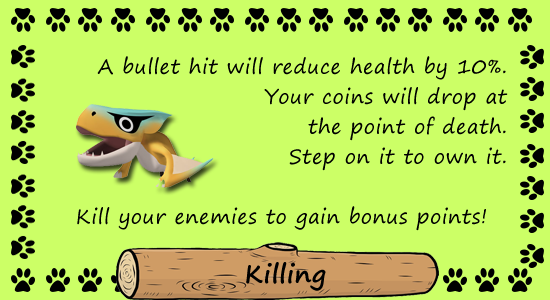
<style>
.page{position:relative;width:550px;height:300px;background:#ccff66}
.page>*{position:absolute;margin:0}
.t1{font:20px/30px "SegoePrint";letter-spacing:0.025em;color:#000000}
.t2{font:25px "SegoePrint-Bold";letter-spacing:0.025em;color:#000000}
</style>
<div class="page">
<p class="t1" style="left:77px;top:56px;width:431px;height:175px;text-align:right">A bullet hit will reduce health by 10%.<br> Your coins will drop at <br>the point of death.<br>Step on it to own it.<br><br>Kill your enemies to gain bonus points!</p>
<p class="t2" style="left:246px;top:262px;width:80px;height:29px">Killing</p>
</div>
